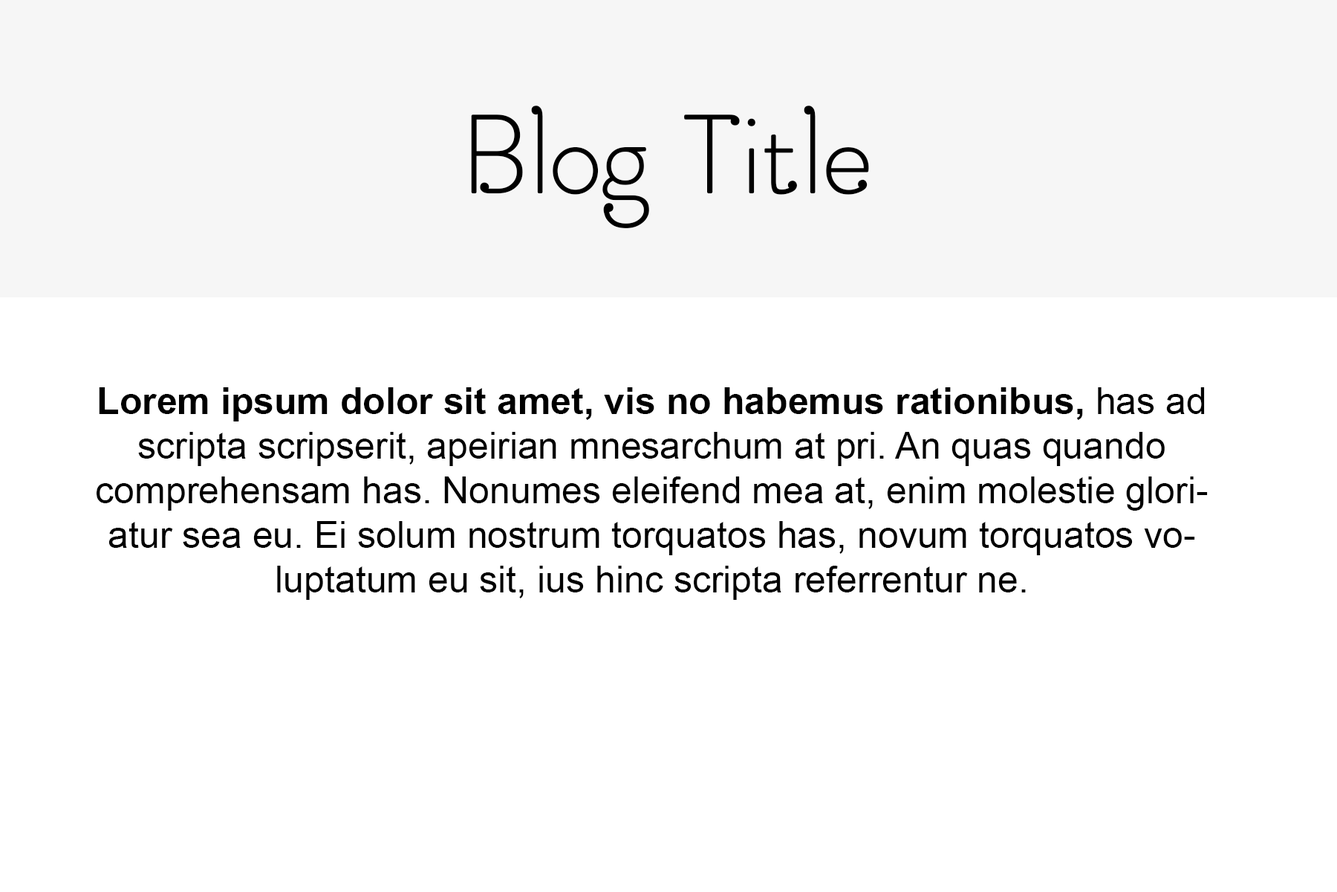
<style>
.page{position:relative;width:1337px;height:892px;background:#ffffff}
.page>*{position:absolute;margin:0}
.t1{font:80.5px "Amsdam";color:#000000}
.t2{font:8.9px "MyriadPro-Regular";color:#000000}
.t3{font:37.2px "ArialMT";color:#000000}
.t4{font:37.2px "Arial-BoldMT";color:#000000}
</style>
<div class="page">
<p class="t1" style="left:471px;top:106px;width:398px;height:122px"><span class="t2"><br><br></span>Blog Title</p>
<p class="t3" style="left:97px;top:387px;width:1111px;height:213px;text-align:center"><span class="t4">Lorem ipsum dolor sit amet, vis no habemus rationibus,</span> has ad scripta scripserit, apeirian mnesarchum at pri. An quas quando comprehensam has. Nonumes eleifend mea at, enim molestie gloriatur sea eu. Ei solum nostrum torquatos has, novum torquatos voluptatum eu sit, ius hinc scripta referrentur ne.</p>
</div>
